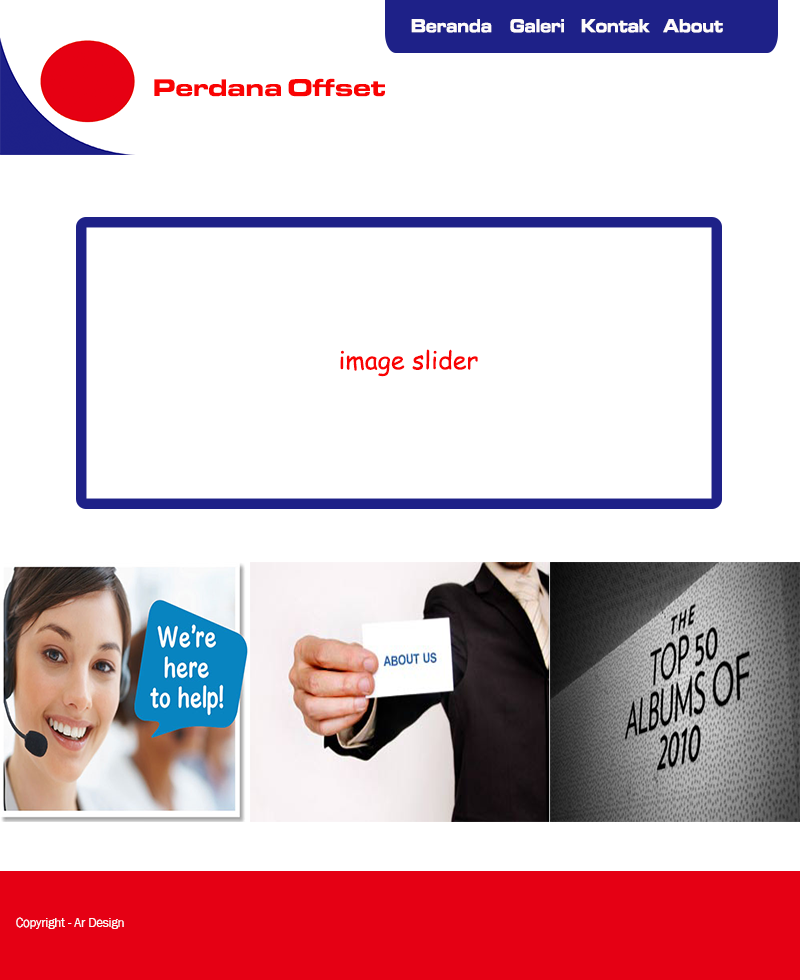
<style>
.page{position:relative;width:800px;height:980px;background:#ffffff}
.page>*{position:absolute;margin:0}
.t1{font:19.5px "EurostileMN-ExtendedBold";color:#fefbfb;scale:0.79 1}
.t2{font:25px "EurostileMN-ExtendedBold";color:#f90303}
.t3{font:25px "ComicSansMS";color:#f90303}
.t4{font:12.5px "FranklinGothic-Book";color:#fcf9f9}
</style>
<div class="page">
<p class="t1" style="left:411px;top:19px;width:81px;height:14px">Beranda</p>
<p class="t1" style="left:510px;top:19px;width:54px;height:14px">Galeri</p>
<p class="t1" style="left:581px;top:19px;width:69px;height:14px">Kontak</p>
<p class="t1" style="left:663px;top:19px;width:60px;height:14px">About</p>
<p class="t2" style="left:154px;top:78px;width:231px;height:19px">Perdana Offset</p>
<p class="t3" style="left:340px;top:349px;width:138px;height:28px">image slider</p>
<p class="t4" style="left:16px;top:917px;width:108px;height:12px">Copyright - Ar Design</p>
</div>
